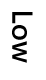
<style>
.page{position:relative;width:46px;height:80px;background:#ffffff}
.page>*{position:absolute;margin:0}
.t1{font:28.9px "SegoeUI-Semibold";color:#000000}
</style>
<div class="page">
<p class="t1" style="left:12px;top:12px;width:21px;height:51px;rotate:90deg">Low</p>
</div>
